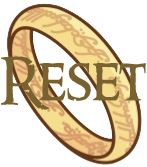
<style>
.page{position:relative;width:147px;height:167px;background:#ffffff}
.page>*{position:absolute;margin:0}
.t1{font:60px "RingbearerMedium";color:#796230;scale:0.9 1}
</style>
<div class="page">
<p class="t1" style="left:1px;top:56px;width:145px;height:54px">Reset</p>
</div>
